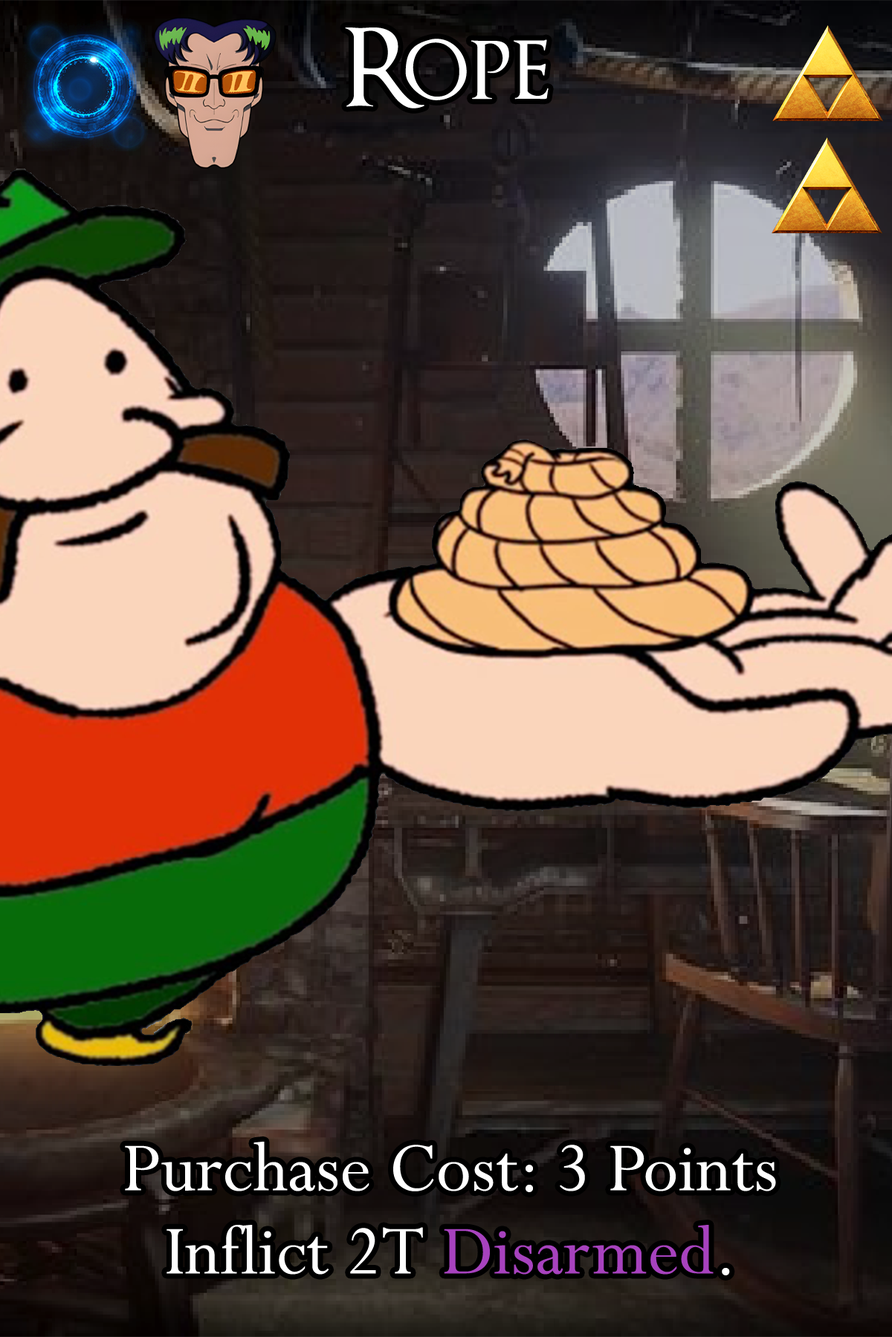
<style>
.page{position:relative;width:892px;height:1337px}
.page>*{position:absolute;margin:0}
.t1{font:182px "OptimusPrinceps";color:#ffffff}
.t2{font:132.3px/83.2px "Perpetua";color:#ffffff}
.t3{font:132.3px/83.2px "Perpetua";color:#a742be}
</style>
<div class="page">
<p class="t1" style="left:345px;top:27px;width:203px;height:81px">Rope</p>
<p class="t2" style="left:125px;top:1142px;width:651px;height:134px;text-align:center">Purchase Cost: 3 Points<br>Inflict 2T <span class="t3">Disarmed</span>.</p>
</div>
